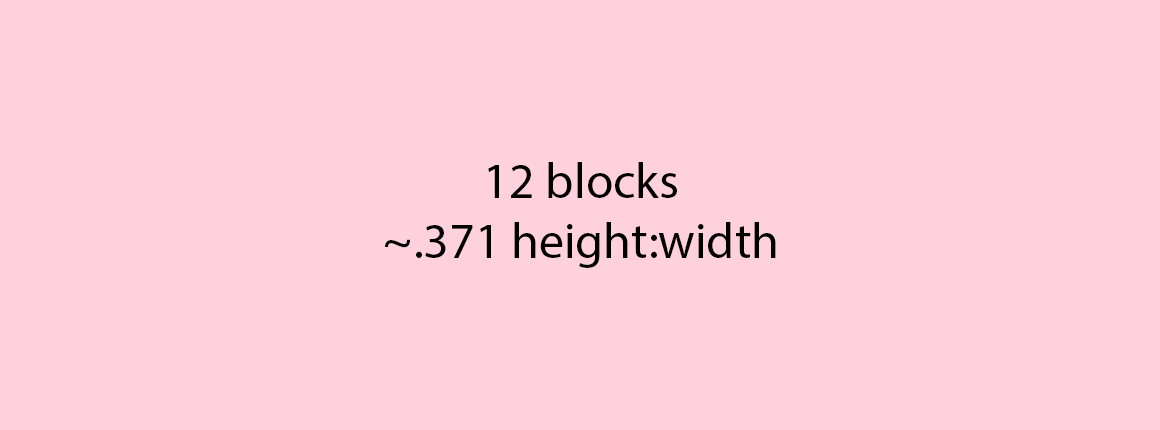
<style>
.page{position:relative;width:1160px;height:430px;background:#ffd1dc}
.page>*{position:absolute;margin:0}
.t1{font:12px "MyriadPro-Regular";color:#000000}
</style>
<div class="page">
<p class="t1" style="left:385px;top:162px;width:391px;height:106px;text-align:center">12 blocks<br>~.371 height:width</p>
</div>
